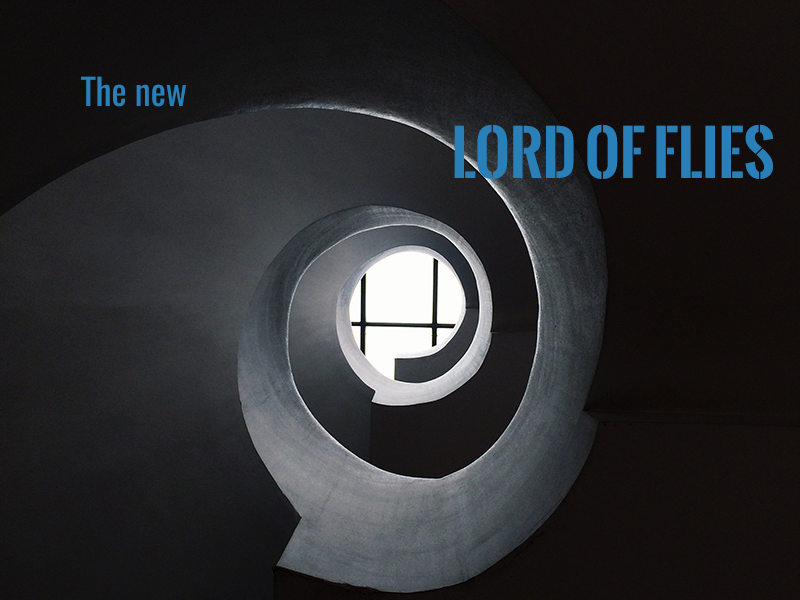
<style>
.page{position:relative;width:800px;height:600px}
.page>*{position:absolute;margin:0}
.t1{font:60px "OswaldStencil-Bold";color:#2980b9}
.t2{font:36px "Oswald-Regular";color:#2980b9}
</style>
<div class="page">
<p class="t1" style="left:81px;top:76px;width:692px;height:103px"><span class="t2">The new <br>                           </span>Lord of Flies</p>
</div>
